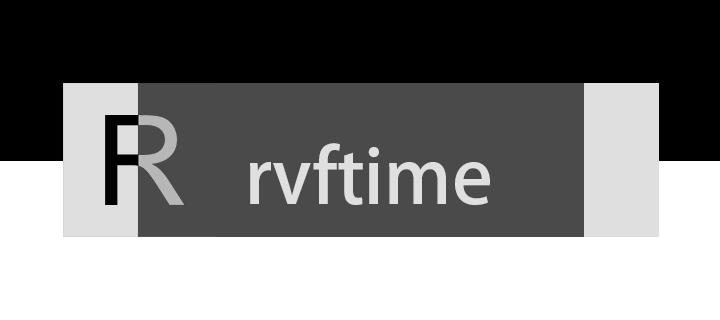
<style>
.page{position:relative;width:720px;height:320px;background:#000000}
.page>*{position:absolute;margin:0}
.t1{font:75px "AdobeHeitiStd-Regular";color:#dfdfdf}
</style>
<div class="page">
<p class="t1" style="left:250px;top:143px;width:240px;height:62px">rvftime</p>
</div>
